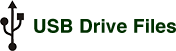
<style>
.page{position:relative;width:176px;height:51px;background:#ffffff}
.page>*{position:absolute;margin:0}
.t1{font:19px "Helvetica-Bold";letter-spacing:0.01em;color:#002e00}
</style>
<div class="page">
<p class="t1" style="left:34px;top:18px;width:142px;height:15px">USB Drive Files</p>
</div>
